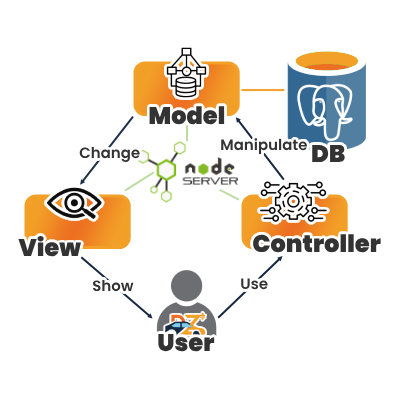
<style>
.page{position:relative;width:400px;height:400px;background:#ffffff}
.page>*{position:absolute;margin:0}
.t1{font:24px "Poppins-Black";color:#333333}
.t2{font:15px "Poppins-SemiBold";color:#333333}
</style>
<div class="page">
<p class="t1" style="left:149px;top:106px;width:76px;height:19px">Model</p>
<p class="t2" style="left:79px;top:146px;width:61px;height:17px">Change</p>
<p class="t2" style="left:221px;top:138px;width:86px;height:16px">Manipulate</p>
<p class="t1" style="left:312px;top:145px;width:33px;height:17px">DB</p>
<p class="t1" style="left:18px;top:236px;width:63px;height:21px">View</p>
<p class="t1" style="left:253px;top:234px;width:128px;height:19px">Controller</p>
<p class="t2" style="left:92px;top:279px;width:42px;height:13px">Show</p>
<p class="t2" style="left:241px;top:278px;width:27px;height:12px">Use</p>
<p class="t1" style="left:158px;top:334px;width:57px;height:18px">User</p>
</div>
